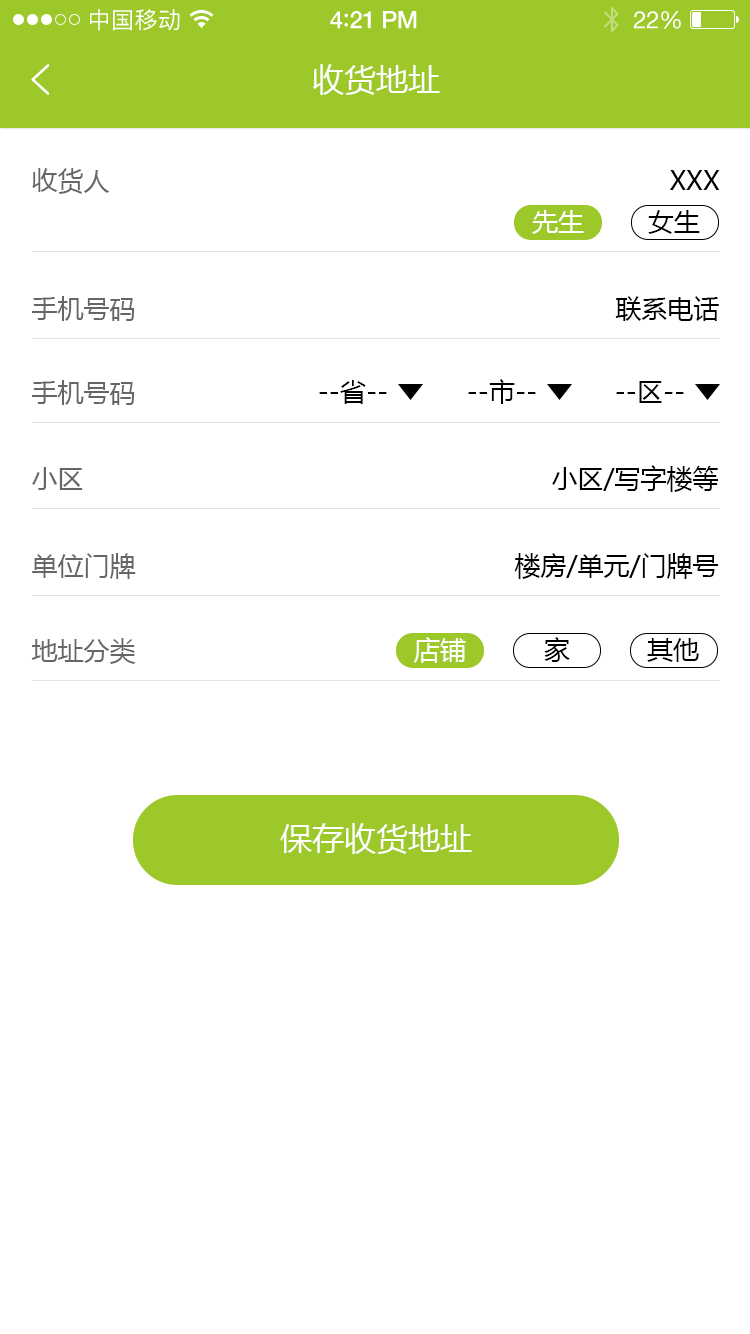
<style>
.page{position:relative;width:750px;height:1334px;background:#ffffff}
.page>*{position:absolute;margin:0}
.t1{font:23px "PingFangSC-Regular";letter-spacing:0.02em;color:#ffffff}
.t2{font:24px "HelveticaNeue-Medium";letter-spacing:-0.02em;color:#ffffff}
.t3{font:26px "Avenir-Medium";letter-spacing:-0.02em;color:#ffffff}
.t4{font:24px "HelveticaNeue";letter-spacing:-0.02em;color:#ffffff}
.t5{font:32px "MicrosoftYaHei";color:#ffffff;text-transform:uppercase}
.t6{font:26px "MicrosoftYaHei";color:#666666;text-transform:uppercase}
.t7{font:26px "MicrosoftYaHei";color:#000000;text-transform:uppercase}
.t8{font:26px "MicrosoftYaHei";color:#ffffff;text-transform:uppercase}
</style>
<div class="page">
<p class="t1" style="left:90px;top:9px;width:90px;height:22px">中国移动</p>
<p class="t2" style="left:330px;top:11px;width:87px;height:18px">4<span class="t3">:</span>21 PM</p>
<p class="t4" style="left:633px;top:11px;width:48px;height:18px">22%</p>
<p class="t5" style="left:313px;top:64px;width:127px;height:31px">收货地址</p>
<p class="t6" style="left:32px;top:168px;width:78px;height:26px">收货人</p>
<p class="t7" style="left:669px;top:170px;width:51px;height:20px">xxx</p>
<p class="t8" style="left:532px;top:210px;width:52px;height:24px">先生</p>
<p class="t7" style="left:648px;top:210px;width:52px;height:24px">女生</p>
<p class="t6" style="left:32px;top:296px;width:103px;height:25px">手机号码</p>
<p class="t7" style="left:615px;top:296px;width:104px;height:25px">联系电话</p>
<p class="t6" style="left:32px;top:380px;width:103px;height:25px">手机号码</p>
<p class="t7" style="left:319px;top:380px;width:68px;height:24px">--省--</p>
<p class="t7" style="left:468px;top:379px;width:68px;height:25px">--市--</p>
<p class="t7" style="left:616px;top:381px;width:68px;height:22px">--区--</p>
<p class="t6" style="left:32px;top:467px;width:51px;height:23px">小区</p>
<p class="t7" style="left:552px;top:465px;width:166px;height:27px">小区/写字楼等</p>
<p class="t6" style="left:32px;top:553px;width:104px;height:26px">单位门牌</p>
<p class="t7" style="left:514px;top:553px;width:204px;height:26px">楼房/单元/门牌号</p>
<p class="t6" style="left:31px;top:638px;width:105px;height:26px">地址分类</p>
<p class="t8" style="left:414px;top:637px;width:52px;height:26px">店铺</p>
<p class="t7" style="left:544px;top:637px;width:26px;height:25px">家</p>
<p class="t7" style="left:647px;top:638px;width:52px;height:24px">其他</p>
<p class="t5" style="left:280px;top:823px;width:192px;height:31px">保存收货地址</p>
</div>
